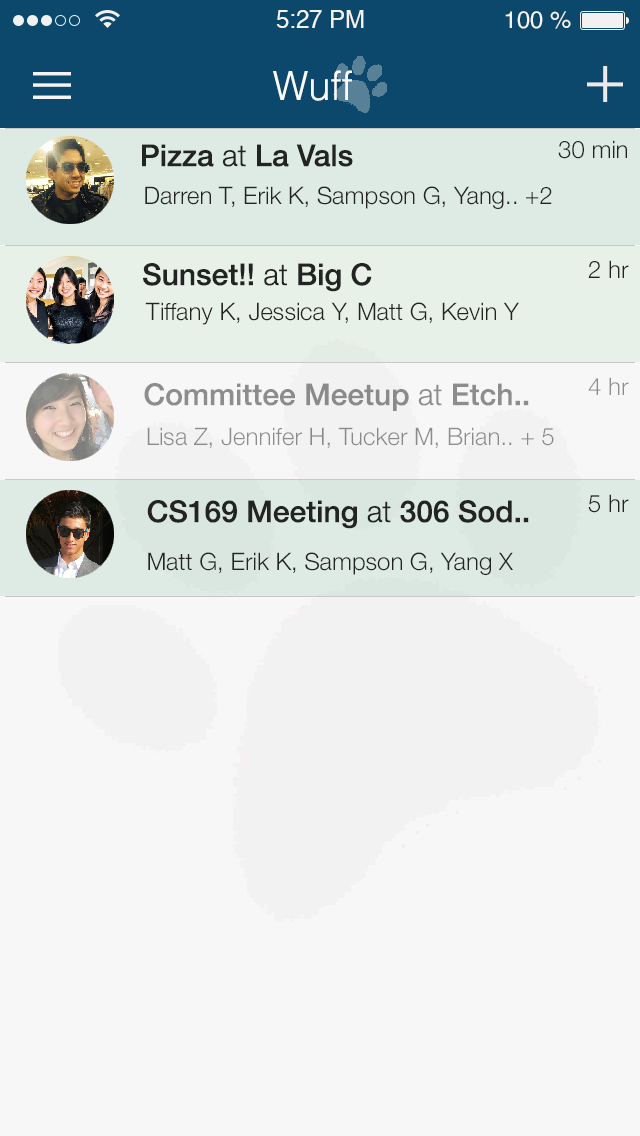
<style>
.page{position:relative;width:640px;height:1136px;background:#f7f7f7}
.page>*{position:absolute;margin:0}
.t1{font:24px "Helvetica";color:#f5f3f3}
.t2{font:24px "Helvetica";color:#f5f5f5}
.t3{font:40px "Helvetica-Light";color:#fbfbfb}
.t4{font:30px "HelveticaNeue-Medium";color:#232323}
.t5{font:30px "HelveticaNeue-Light";color:#232323}
.t6{font:24px "HelveticaNeue-Light";color:#232323}
.t7{font:24px "HelveticaNeue-Light";color:#8d8d8d}
.t8{font:30px "HelveticaNeue-Medium";color:#8d8d8d}
.t9{font:30px "HelveticaNeue-Light";color:#8d8d8d}
.t10{font:24px "HelveticaNeue-Light";color:#8a8a8a}
</style>
<div class="page">
<p class="t1" style="left:276px;top:10px;width:88px;height:18px">5:27 PM</p>
<p class="t2" style="left:505px;top:11px;width:66px;height:18px">100 %</p>
<p class="t3" style="left:273px;top:70px;width:79px;height:31px">Wuff</p>
<p class="t4" style="left:142px;top:144px;width:211px;height:23px">Pizza <span class="t5">at </span>La Vals</p>
<p class="t6" style="left:558px;top:140px;width:69px;height:19px">30 min</p>
<p class="t6" style="left:145px;top:186px;width:407px;height:23px">Darren T, Erik K, Sampson G, Yang.. +2</p>
<p class="t4" style="left:143px;top:263px;width:229px;height:29px">Sunset!! <span class="t5">at </span>Big C</p>
<p class="t6" style="left:588px;top:260px;width:41px;height:18px">2 hr</p>
<p class="t6" style="left:145px;top:302px;width:374px;height:23px">Tiffany K, Jessica Y, Matt G, Kevin Y</p>
<p class="t7" style="left:588px;top:377px;width:41px;height:18px">4 hr</p>
<p class="t8" style="left:144px;top:383px;width:385px;height:28px">Committee Meetup <span class="t9">at </span>Etch..</p>
<p class="t10" style="left:147px;top:427px;width:407px;height:22px">Lisa Z, Jennifer H, Tucker M, Brian.. + 5</p>
<p class="t6" style="left:588px;top:494px;width:41px;height:19px">5 hr</p>
<p class="t4" style="left:147px;top:500px;width:382px;height:29px">CS169 Meeting <span class="t5">at </span>306 Sod..</p>
<p class="t6" style="left:148px;top:552px;width:365px;height:23px">Matt G, Erik K, Sampson G, Yang X</p>
</div>
